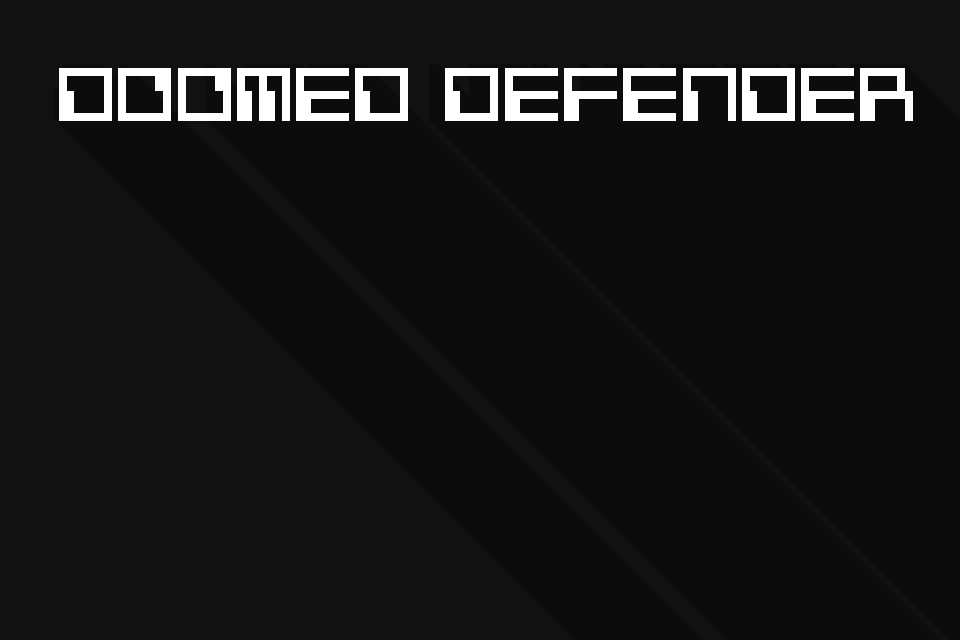
<style>
.page{position:relative;width:960px;height:640px;background:#0c0c0c}
.page>*{position:absolute;margin:0}
.t1{font:59.5px "G7-Silkworm-TTF";color:#ffffff}
</style>
<div class="page">
<p class="t1" style="left:59px;top:68px;width:854px;height:53px">DOOMED DEFENDER</p>
</div>
